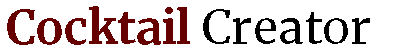
<style>
.page{position:relative;width:401px;height:55px;background:#ffffff}
.page>*{position:absolute;margin:0}
.t1{font:45.8px "Merriweather-Bold";color:#660000}
.t2{font:45.8px "Merriweather-Regular";color:#000000}
</style>
<div class="page">
<p class="t1" style="left:7px;top:6px;width:363px;height:39px">Cocktail <span class="t2">Creator</span></p>
</div>
